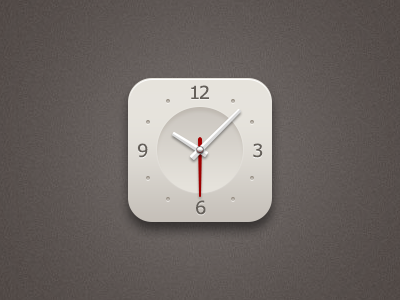
<style>
.page{position:relative;width:400px;height:300px}
.page>*{position:absolute;margin:0}
.t1{font:18px "MSReferenceSansSerif";letter-spacing:-0.1em;color:#65605a}
.t2{font:18px "MSReferenceSansSerif";color:#65605a}
</style>
<div class="page">
<p class="t1" style="left:191px;top:85px;width:18px;height:14px">12</p>
<p class="t2" style="left:137px;top:143px;width:11px;height:15px">9</p>
<p class="t2" style="left:253px;top:143px;width:10px;height:15px">3</p>
<p class="t2" style="left:196px;top:200px;width:10px;height:15px">6</p>
</div>
